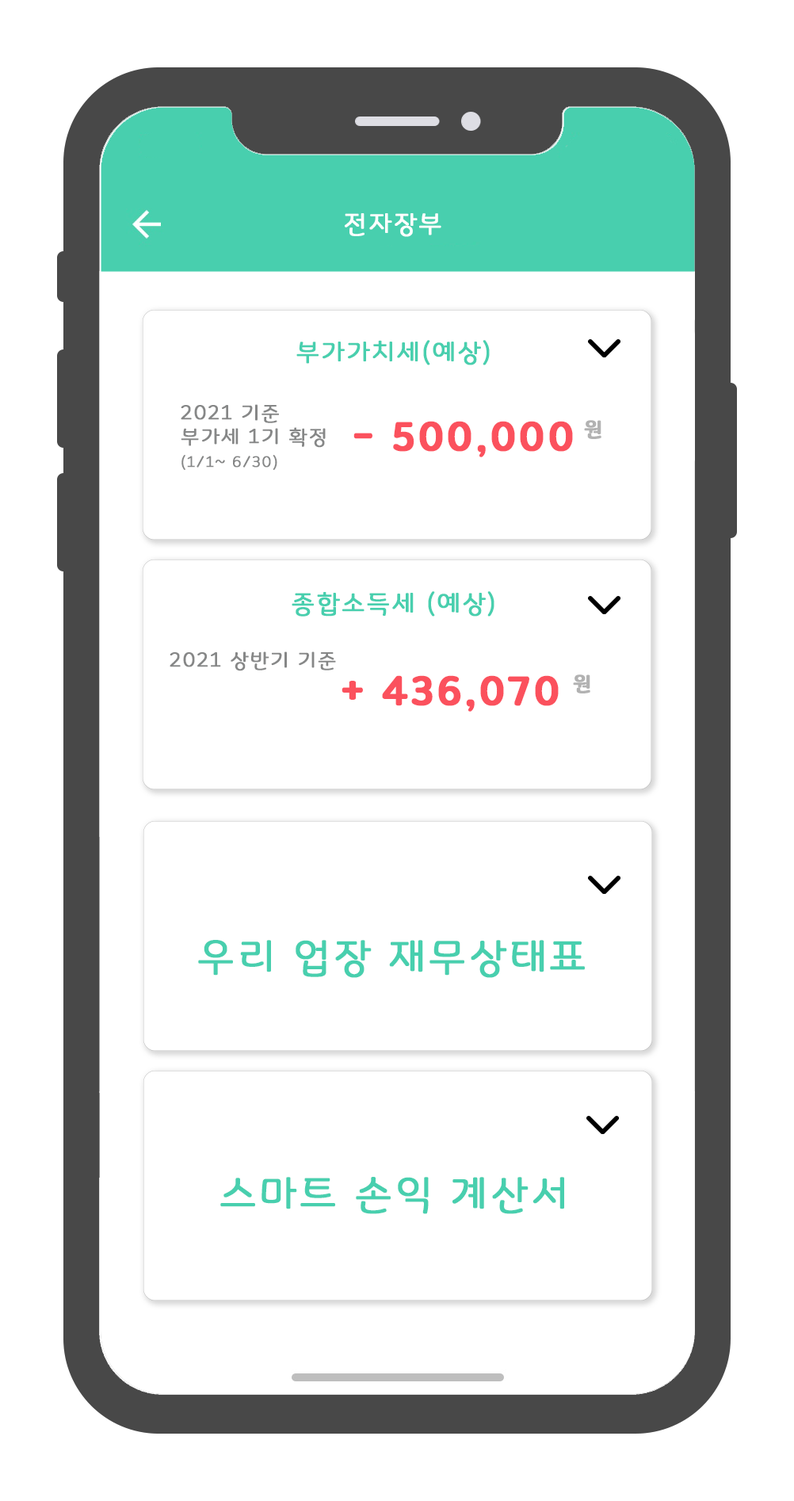
<style>
.page{position:relative;width:794px;height:1501px;background:#ffffff}
.page>*{position:absolute;margin:0}
.t1{font:23.8px "Binggrae";letter-spacing:0.05em;color:#ffffff;font-weight:bold}
.t2{font:23.8px "Binggrae";letter-spacing:0.05em;color:#48cfae;font-weight:bold}
.t3{font:19px/23.8px "Binggrae";letter-spacing:0.05em;color:#868787;font-weight:bold}
.t4{font:14.3px/23.8px "Binggrae";letter-spacing:0.05em;color:#868787;font-weight:bold}
.t5{font:38px "Binggrae-Bold";letter-spacing:0.05em;color:#fb515d;font-weight:bold}
.t6{font:19px "Binggrae-Bold";letter-spacing:0.05em;color:#b2b2b2;font-weight:bold}
.t7{font:19px "Binggrae";letter-spacing:0.05em;color:#868787;font-weight:bold}
.t8{font:38px "Binggrae";letter-spacing:0.05em;color:#48cfae;font-weight:bold}
</style>
<div class="page">
<p class="t1" style="left:345px;top:213px;width:97px;height:24px">전자장부</p>
<p class="t2" style="left:296px;top:340px;width:194px;height:25px">부가가치세(예상)</p>
<p class="t3" style="left:181px;top:404px;width:145px;height:66px">2021 기준<br>부가세 1기 확정<br><span class="t4">(1/1~ 6/30)</span></p>
<p class="t5" style="left:354px;top:421px;width:219px;height:36px">- 500,000</p>
<p class="t6" style="left:584px;top:420px;width:18px;height:19px">원</p>
<p class="t2" style="left:292px;top:591px;width:203px;height:26px">종합소득세 (예상)</p>
<p class="t7" style="left:170px;top:652px;width:166px;height:19px">2021 상반기 기준</p>
<p class="t5" style="left:342px;top:675px;width:217px;height:37px">+ 436,070</p>
<p class="t6" style="left:573px;top:675px;width:18px;height:19px">원</p>
<p class="t8" style="left:198px;top:940px;width:387px;height:38px">우리 업장 재무상태표</p>
<p class="t8" style="left:220px;top:1177px;width:344px;height:37px">스마트 손익 계산서</p>
</div>
